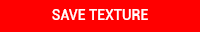
<style>
.page{position:relative;width:200px;height:32px;background:#ff0000}
.page>*{position:absolute;margin:0}
.t1{font:14px "Roboto-Medium";color:#ffffff}
</style>
<div class="page">
<p class="t1" style="left:52px;top:9px;width:96px;height:11px">SAVE TEXTURE</p>
</div>
